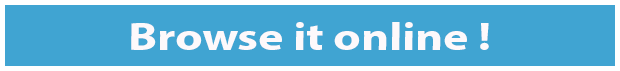
<style>
.page{position:relative;width:620px;height:71px;background:#40a4d2}
.page>*{position:absolute;margin:0}
.t1{font:39.3px "MyriadPro-Bold";color:#fdf9fb;scale:1.22 1}
</style>
<div class="page">
<p class="t1" style="left:131px;top:22px;width:358px;height:28px">Browse it online !</p>
</div>
